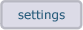
<style>
.page{position:relative;width:83px;height:30px;background:#dcdbe7}
.page>*{position:absolute;margin:0}
.t1{font:12px "Verdana";color:#285c7b}
</style>
<div class="page">
<p class="t1" style="left:18px;top:10px;width:47px;height:12px">settings</p>
</div>
